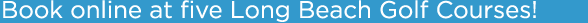
<style>
.page{position:relative;width:588px;height:23px;background:#3399cc}
.page>*{position:absolute;margin:0}
.t1{font:24px "Gotham-Book";color:#ffffff}
</style>
<div class="page">
<p class="t1" style="left:3px;top:0px;width:533px;height:22px">Book online at five Long Beach Golf Courses!</p>
</div>
